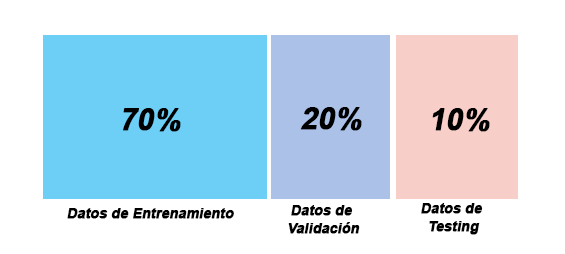
<style>
.page{position:relative;width:565px;height:254px;background:#ffffff}
.page>*{position:absolute;margin:0}
.t1{font:30px "Arial-BoldMT";letter-spacing:-0.01em;color:#000000;font-weight:bold;font-style:italic}
.t2{font:14px "Arial-BoldMT";letter-spacing:-0.01em;color:#010101;font-weight:bold;font-style:italic}
.t3{font:14px/18px "Arial-BoldMT";letter-spacing:-0.01em;color:#010101;font-weight:bold;font-style:italic}
</style>
<div class="page">
<p class="t1" style="left:123px;top:108px;width:58px;height:24px">70%</p>
<p class="t1" style="left:300px;top:107px;width:62px;height:24px">20%</p>
<p class="t1" style="left:432px;top:108px;width:58px;height:24px">10%</p>
<p class="t2" style="left:67px;top:208px;width:167px;height:11px">Datos de Entrenamiento</p>
<p class="t3" style="left:288px;top:205px;width:72px;height:29px;text-align:center">Datos de <br>Validación</p>
<p class="t3" style="left:421px;top:203px;width:62px;height:32px;text-align:center">Datos de <br>Testing</p>
</div>
